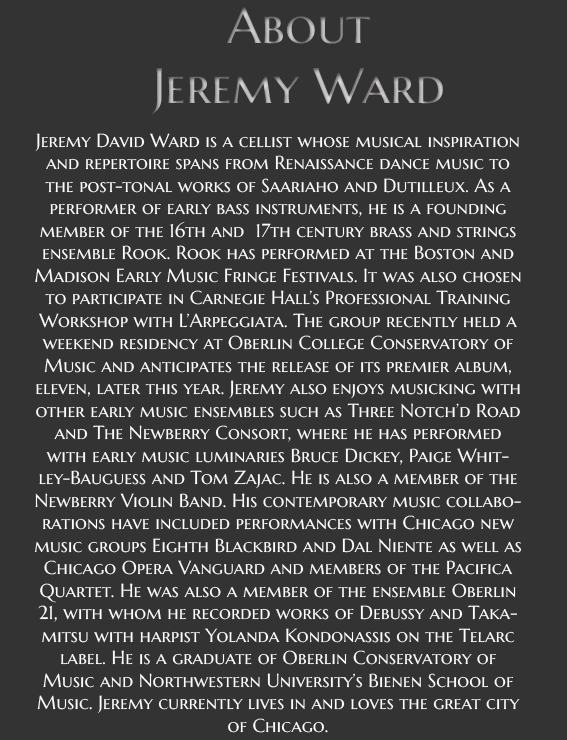
<style>
.page{position:relative;width:567px;height:740px;background:#333333}
.page>*{position:absolute;margin:0}
.t1{font:50px "MarcellusSC-Regular"}
.t2{font:18.7px "MarcellusSC-Regular";color:#fefefe}
</style>
<div class="page">
<p class="t1" style="left:152px;top:7px;width:291px;height:108px;text-align:center">About <br>Jeremy Ward</p>
<p class="t2" style="left:34px;top:133px;width:488px;height:600px;text-align:center">Jeremy David Ward is a cellist whose musical inspiration and repertoire spans from Renaissance dance music to the post-tonal works of Saariaho and Dutilleux. As a performer of early bass instruments, he is a founding member of the 16th and  17th century brass and strings ensemble Rook. Rook has performed at the Boston and Madison Early Music Fringe Festivals. It was also chosen to participate in Carnegie Hall’s Professional Training Workshop with L’Arpeggiata. The group recently held a weekend residency at Oberlin College Conservatory of Music and anticipates the release of its premier album, eleven, later this year. Jeremy also enjoys musicking with other early music ensembles such as Three Notch’d Road and The Newberry Consort, where he has performed with early music luminaries Bruce Dickey, Paige Whitley-Bauguess and Tom Zajac. He is also a member of the Newberry Violin Band. His contemporary music collaborations have included performances with Chicago new music groups Eighth Blackbird and Dal Niente as well as Chicago Opera Vanguard and members of the Pacifica Quartet. He was also a member of the ensemble Oberlin 21, with whom he recorded works of Debussy and Takamitsu with harpist Yolanda Kondonassis on the Telarc label. He is a graduate of Oberlin Conservatory of Music and Northwestern University’s Bienen School of Music. Jeremy currently lives in and loves the great city of Chicago.</p>
</div>
